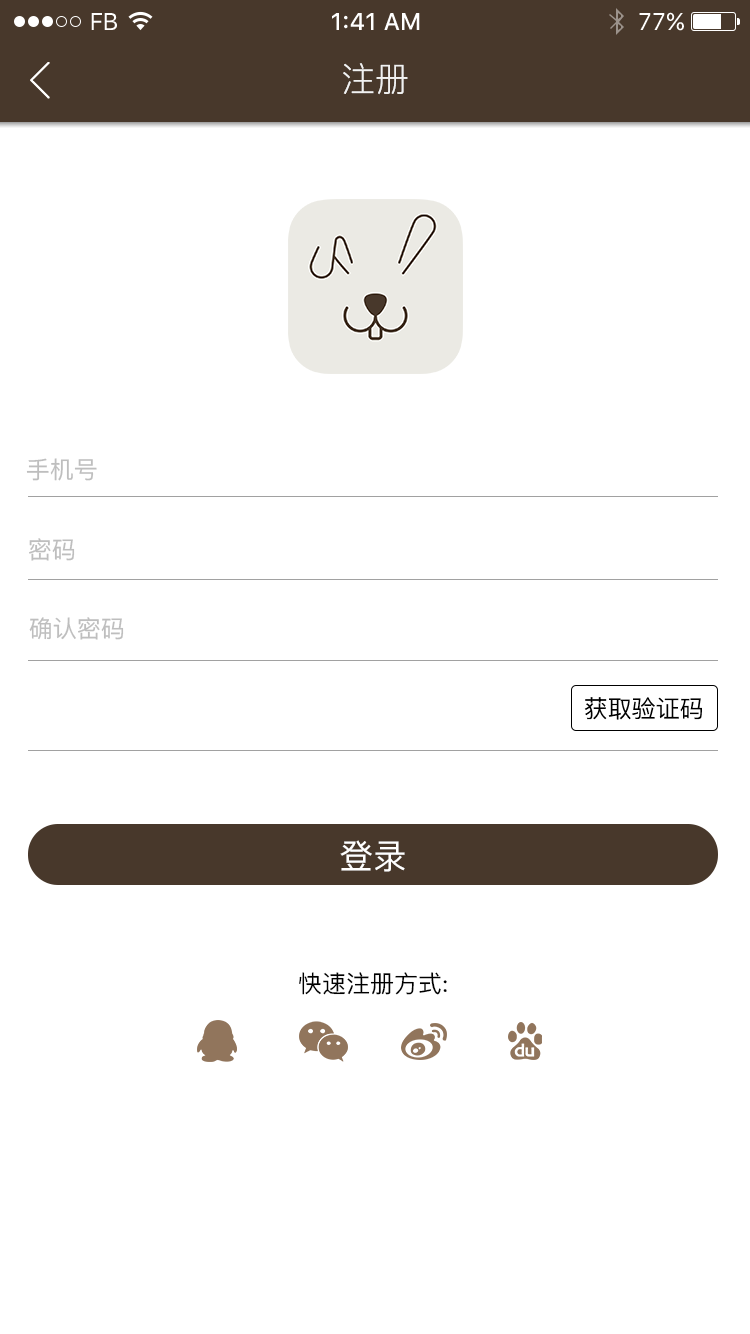
<style>
.page{position:relative;width:750px;height:1334px;background:#ffffff}
.page>*{position:absolute;margin:0}
.t1{font:24px "SFUIText-Regular";letter-spacing:-0.025em;color:#ffffff}
.t2{font:24px "SFUIText-Medium";color:#ffffff}
.t3{font:24px "SFUIText-Regular";color:#ffffff}
.t4{font:34px "PingFang-SC-Regular";color:#f1f1f1}
.t5{font:24px "PingFang-SC-Medium";color:#bebebe}
.t6{font:24px "PingFang-SC-Medium";color:#000000}
.t7{font:34px "PingFang-SC-Medium";color:#ffffff}
</style>
<div class="page">
<p class="t1" style="left:91px;top:13px;width:26px;height:17px">FB</p>
<p class="t2" style="left:332px;top:13px;width:88px;height:17px">1:41 AM</p>
<p class="t3" style="left:639px;top:12px;width:45px;height:19px">77%</p>
<p class="t4" style="left:343px;top:63px;width:65px;height:32px">注册</p>
<p class="t5" style="left:26px;top:458px;width:71px;height:23px">手机号</p>
<p class="t5" style="left:29px;top:538px;width:46px;height:23px">密码</p>
<p class="t5" style="left:29px;top:617px;width:95px;height:23px">确认密码</p>
<p class="t6" style="left:584px;top:697px;width:118px;height:23px">获取验证码</p>
<p class="t7" style="left:340px;top:840px;width:65px;height:32px">登录</p>
<p class="t6" style="left:299px;top:972px;width:148px;height:23px">快速注册方式:</p>
</div>
